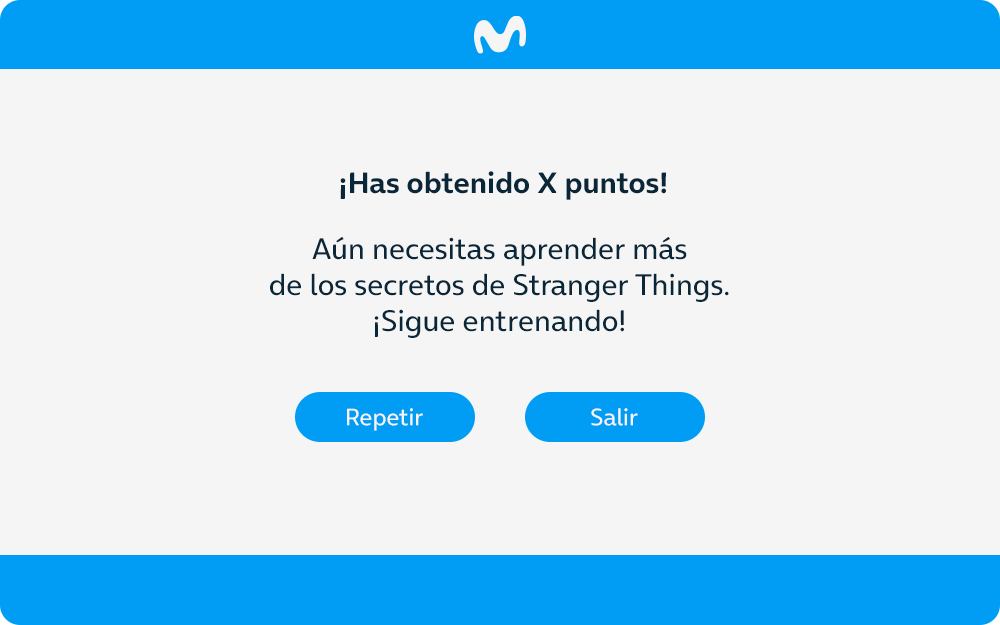
<style>
.page{position:relative;width:1000px;height:625px;background:#f5f5f5}
.page>*{position:absolute;margin:0}
.t1{font:30px "OnAir-Bold";color:#0a2739}
.t2{font:30px "OnAir-Regular";color:#0a2739}
.t3{font:24px "OnAir-Regular";color:#f5f5f5}
</style>
<div class="page">
<p class="t1" style="left:340px;top:171px;width:326px;height:29px">¡Has obtenido X puntos!</p>
<p class="t2" style="left:270px;top:237px;width:459px;height:101px;text-align:center">Aún necesitas aprender más<br>de los secretos de Stranger Things.<br>¡Sigue entrenando!</p>
<p class="t3" style="left:347px;top:408px;width:76px;height:23px">Repetir</p>
<p class="t3" style="left:591px;top:408px;width:47px;height:18px">Salir</p>
</div>
